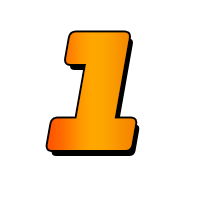
<style>
.page{position:relative;width:200px;height:200px;background:#ffffff}
.page>*{position:absolute;margin:0}
.t1{font:162.9px "Bungee-Regular";color:#fe9d00;font-style:italic}
</style>
<div class="page">
<p class="t1" style="left:47px;top:32px;width:89px;height:118px">1</p>
</div>
